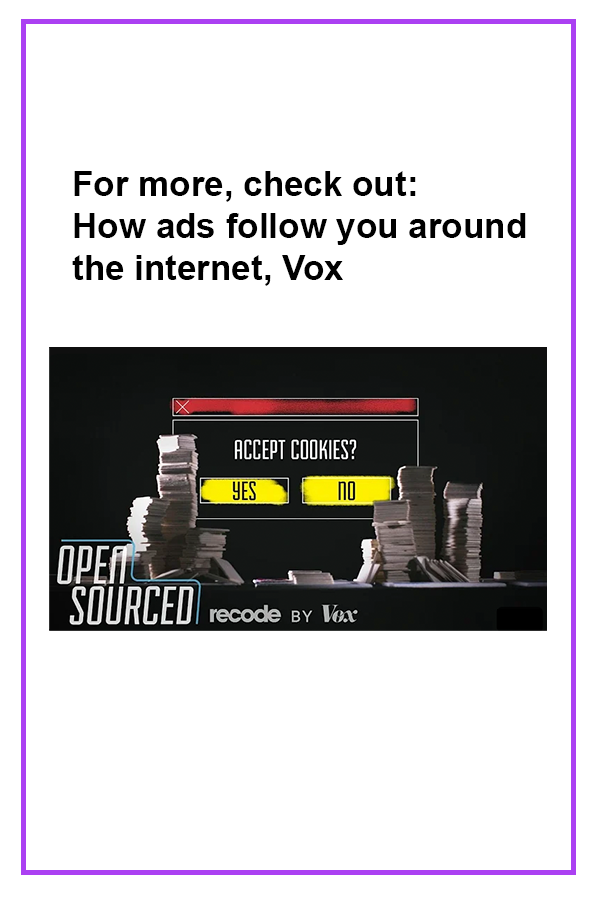
<style>
.page{position:relative;width:600px;height:900px;background:#ffffff}
.page>*{position:absolute;margin:0}
.t1{font:35px "Arial-BoldMT";color:#000000}
</style>
<div class="page">
<p class="t1" style="left:72px;top:171px;width:454px;height:115px">For more, check out: <br>How ads follow you around <br>the internet, Vox</p>
</div>
